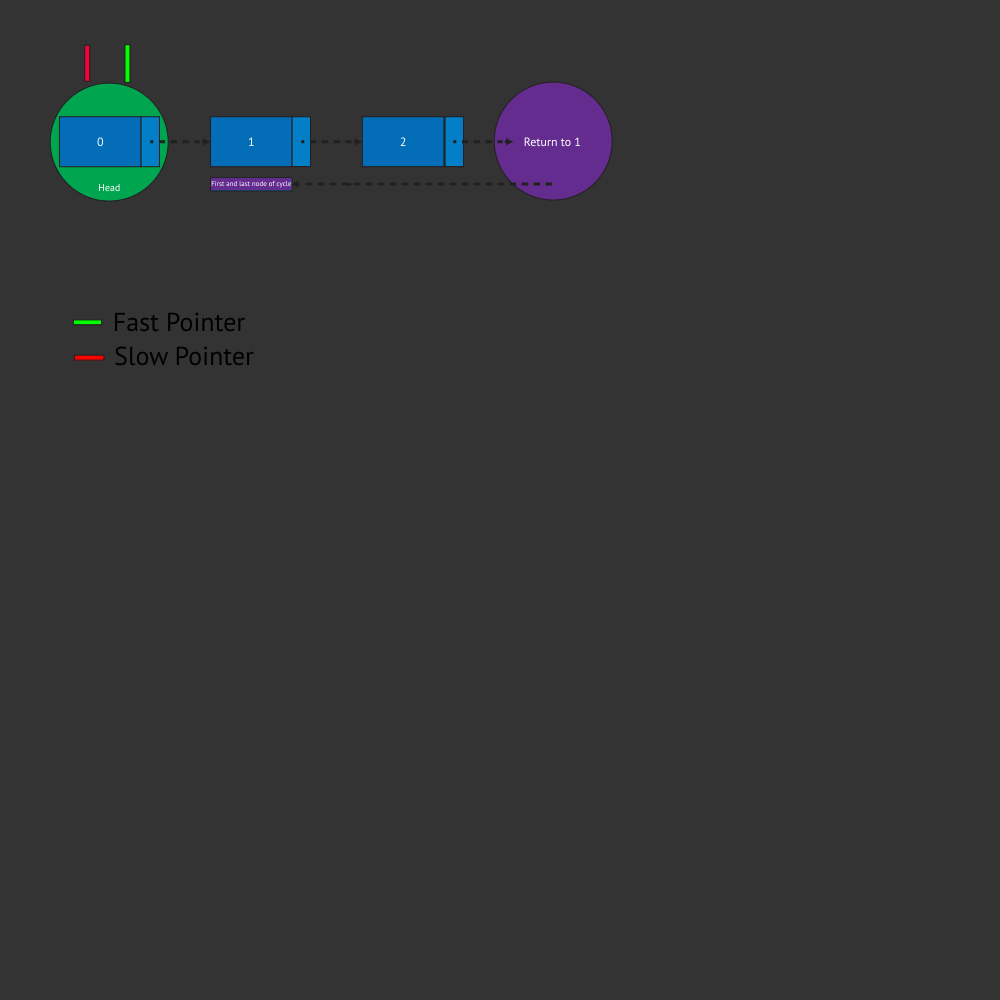
<style>
.page{position:relative;width:1000px;height:1000px;background:#333333}
.page>*{position:absolute;margin:0}
.t1{font:12px "MyriadPro-Regular";color:#ffffff}
.t2{font:12px "MyriadPro-Regular";color:#fafcfe}
.t3{font:10px "MyriadPro-Regular";color:#ffffff}
.t4{font:7px "MyriadPro-Regular"}
.t5{font:26px "MyriadPro-Regular";color:#000000}
</style>
<div class="page">
<p class="t1" style="left:97px;top:137px;width:7px;height:10px">0</p>
<p class="t1" style="left:248px;top:137px;width:6px;height:9px">1</p>
<p class="t2" style="left:400px;top:137px;width:6px;height:9px">2</p>
<p class="t1" style="left:524px;top:137px;width:56px;height:10px">Return to 1</p>
<p class="t3" style="left:98px;top:184px;width:22px;height:8px">Head</p>
<p class="t4" style="left:211px;top:181px;width:81px;height:7px">First and last node of cycle</p>
<p class="t5" style="left:115px;top:312px;width:130px;height:20px">Fast Pointer</p>
<p class="t5" style="left:115px;top:346px;width:139px;height:20px">Slow Pointer</p>
</div>
